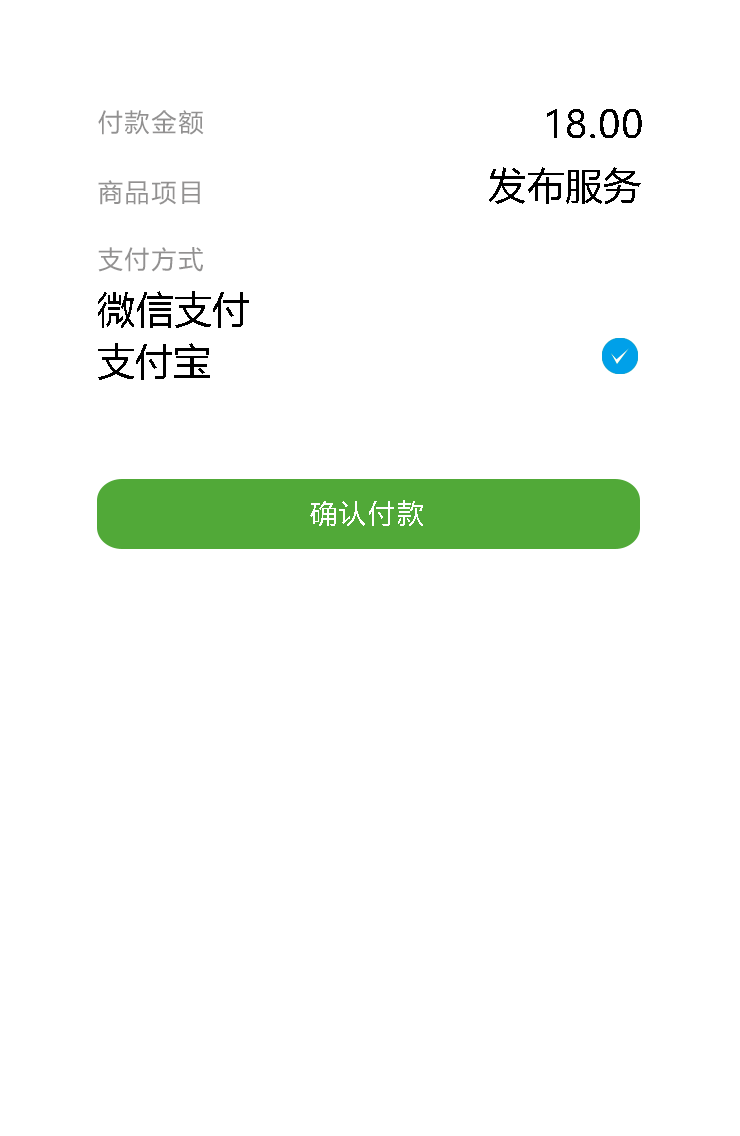
<style>
.page{position:relative;width:740px;height:1136px;background:#ffffff}
.page>*{position:absolute;margin:0}
.t1{font:25px "MicrosoftYaHei";letter-spacing:0.08em;color:#929191}
.t2{font:38px "MicrosoftYaHei";color:#000000}
.t3{font:27.3px "MicrosoftYaHei";letter-spacing:0.08em;color:#ffffff}
</style>
<div class="page">
<p class="t1" style="left:98px;top:110px;width:106px;height:25px">付款金额</p>
<p class="t2" style="left:547px;top:109px;width:95px;height:29px">18.00</p>
<p class="t2" style="left:489px;top:167px;width:152px;height:37px">发布服务</p>
<p class="t1" style="left:98px;top:180px;width:102px;height:25px">商品项目</p>
<p class="t1" style="left:98px;top:247px;width:105px;height:25px">支付方式</p>
<p class="t2" style="left:98px;top:291px;width:151px;height:37px">微信支付</p>
<p class="t2" style="left:98px;top:343px;width:112px;height:37px">支付宝</p>
<p class="t3" style="left:310px;top:500px;width:113px;height:26px">确认付款</p>
</div>
